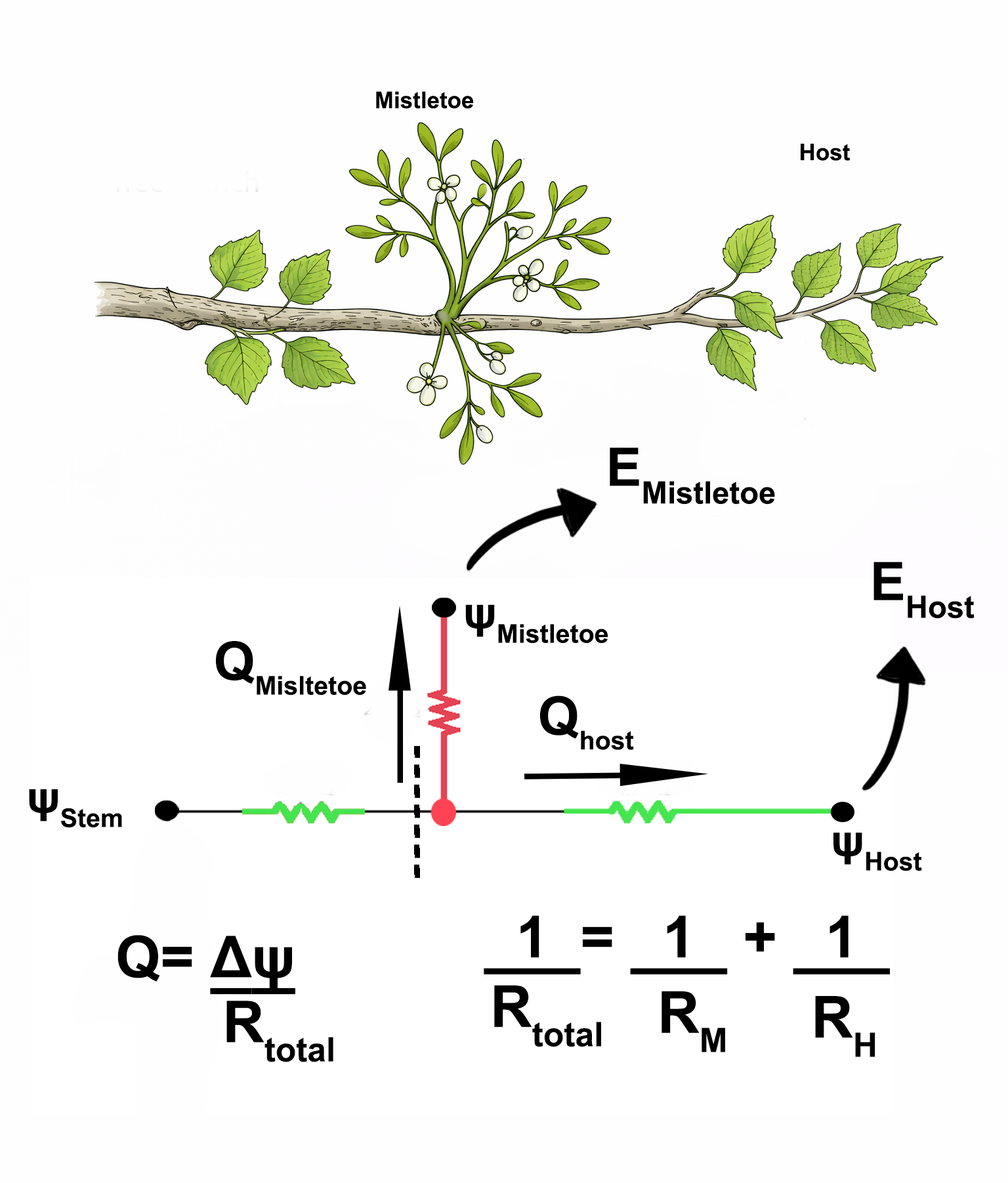
<style>
.page{position:relative;width:1008px;height:1183px;background:#fefefe}
.page>*{position:absolute;margin:0}
.t1{font:39.4px "Arial-BoldMT";color:#000000}
.t2{font:53.2px "Arial-BoldMT";color:#000000}
.t3{font:44.3px "Arial-BoldMT";color:#000000}
.t4{font:58px "Arial-BoldMT";color:#000000;text-decoration:underline}
.t5{font:58px "Arial-BoldMT";color:#000000}
.t6{font:57.8px "Arial-BoldMT";color:#000000}
.t7{font:57.8px "Arial-BoldMT";color:#000000;text-decoration:underline}
</style>
<div class="page">
<p class="t1" style="left:376px;top:91px;width:98px;height:18px">Mistletoe</p>
<p class="t1" style="left:801px;top:144px;width:49px;height:17px">Host</p>
<p class="t2" style="left:610px;top:448px;width:165px;height:57px">EMistletoe</p>
<p class="t2" style="left:873px;top:562px;width:101px;height:57px">EHost</p>
<p class="t3" style="left:465px;top:604px;width:143px;height:39px">ψMistletoe</p>
<p class="t3" style="left:216px;top:641px;width:150px;height:55px"><span class="t2">Q</span>Misltetoe</p>
<p class="t3" style="left:540px;top:696px;width:94px;height:54px"><span class="t2">Q</span>host</p>
<p class="t3" style="left:29px;top:789px;width:93px;height:38px">ψStem</p>
<p class="t3" style="left:833px;top:833px;width:89px;height:38px">ψHost</p>
<p class="t4" style="left:484px;top:915px;width:406px;height:59px">1  <span class="t5">= </span>  1  <span class="t5"> + </span>  1</p>
<p class="t6" style="left:117px;top:935px;width:178px;height:60px">Q= <span class="t7">Δψ</span></p>
<p class="t5" style="left:494px;top:985px;width:107px;height:62px">Rtotal</p>
<p class="t6" style="left:226px;top:1001px;width:107px;height:61px">Rtotal</p>
<p class="t5" style="left:661px;top:991px;width:64px;height:62px">RM</p>
<p class="t5" style="left:815px;top:996px;width:60px;height:61px">RH</p>
</div>
